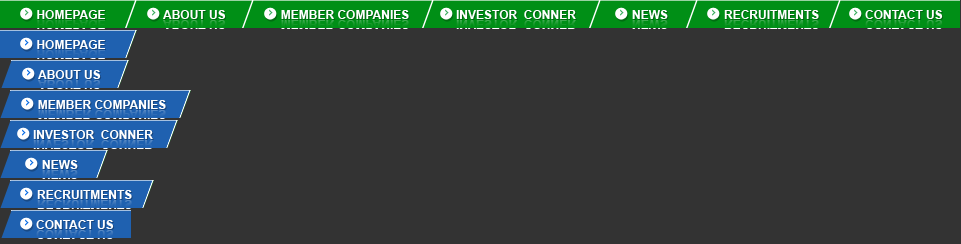
<style>
.page{position:relative;width:961px;height:244px;background:#333333}
.page>*{position:absolute;margin:0}
.t1{font:12px "Arial-BoldMT";color:#ffffff;text-transform:uppercase}
.t2{font:12px "Arial-BoldMT";text-transform:uppercase}
.t3{font:12px "Arial-BoldMT";color:#2c6ab5;text-transform:uppercase}
</style>
<div class="page">
<p class="t1" style="left:37px;top:10px;width:68px;height:9px">Homepage</p>
<p class="t1" style="left:163px;top:10px;width:63px;height:9px">About us</p>
<p class="t1" style="left:281px;top:10px;width:128px;height:9px">Member companies</p>
<p class="t1" style="left:456px;top:10px;width:120px;height:9px">INVESTOR  COnnER</p>
<p class="t1" style="left:632px;top:10px;width:36px;height:9px">NEWS</p>
<p class="t1" style="left:724px;top:10px;width:95px;height:9px">recruitments</p>
<p class="t1" style="left:865px;top:10px;width:78px;height:9px">Contact us</p>
<p class="t2" style="left:37px;top:20px;width:68px;height:9px">Homepage</p>
<p class="t2" style="left:163px;top:20px;width:63px;height:9px">About us</p>
<p class="t2" style="left:281px;top:20px;width:128px;height:9px">Member companies</p>
<p class="t2" style="left:456px;top:20px;width:120px;height:9px">INVESTOR  COnnER</p>
<p class="t2" style="left:632px;top:20px;width:36px;height:9px">NEWS</p>
<p class="t2" style="left:724px;top:20px;width:95px;height:9px">recruitments</p>
<p class="t2" style="left:865px;top:20px;width:78px;height:9px">Contact us</p>
<p class="t1" style="left:37px;top:40px;width:68px;height:9px">Homepage</p>
<p class="t3" style="left:37px;top:50px;width:68px;height:9px">Homepage</p>
<p class="t1" style="left:38px;top:70px;width:63px;height:9px">About us</p>
<p class="t2" style="left:38px;top:80px;width:63px;height:9px">About us</p>
<p class="t1" style="left:38px;top:100px;width:128px;height:9px">Member companies</p>
<p class="t2" style="left:38px;top:110px;width:128px;height:9px">Member companies</p>
<p class="t1" style="left:33px;top:130px;width:120px;height:9px">INVESTOR  COnnER</p>
<p class="t2" style="left:33px;top:140px;width:120px;height:9px">INVESTOR  COnnER</p>
<p class="t1" style="left:42px;top:160px;width:36px;height:9px">NEWS</p>
<p class="t2" style="left:42px;top:170px;width:36px;height:9px">NEWS</p>
<p class="t1" style="left:37px;top:190px;width:95px;height:9px">recruitments</p>
<p class="t2" style="left:37px;top:200px;width:95px;height:9px">recruitments</p>
<p class="t1" style="left:36px;top:220px;width:78px;height:9px">Contact us</p>
<p class="t2" style="left:36px;top:230px;width:78px;height:9px">Contact us</p>
</div>
